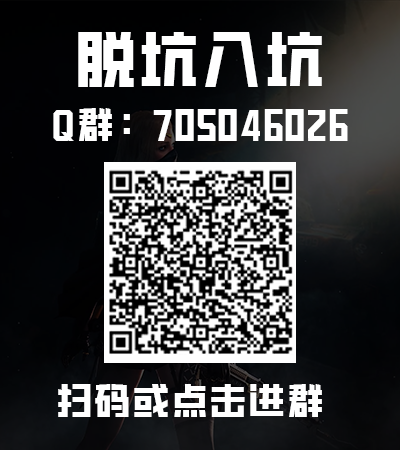
<style>
.page{position:relative;width:400px;height:450px}
.page>*{position:absolute;margin:0}
.t1{font:59.6px "CKTKingKong";letter-spacing:0.06em;color:#ffffff}
.t2{font:36.4px "CKTKingKong";letter-spacing:0.06em;color:#ffffff}
</style>
<div class="page">
<p class="t1" style="left:78px;top:32px;width:244px;height:55px">脱坑入坑</p>
<p class="t2" style="left:53px;top:108px;width:295px;height:33px">Q群：705046026</p>
<p class="t2" style="left:58px;top:384px;width:264px;height:33px">扫码或点击进群</p>
</div>
